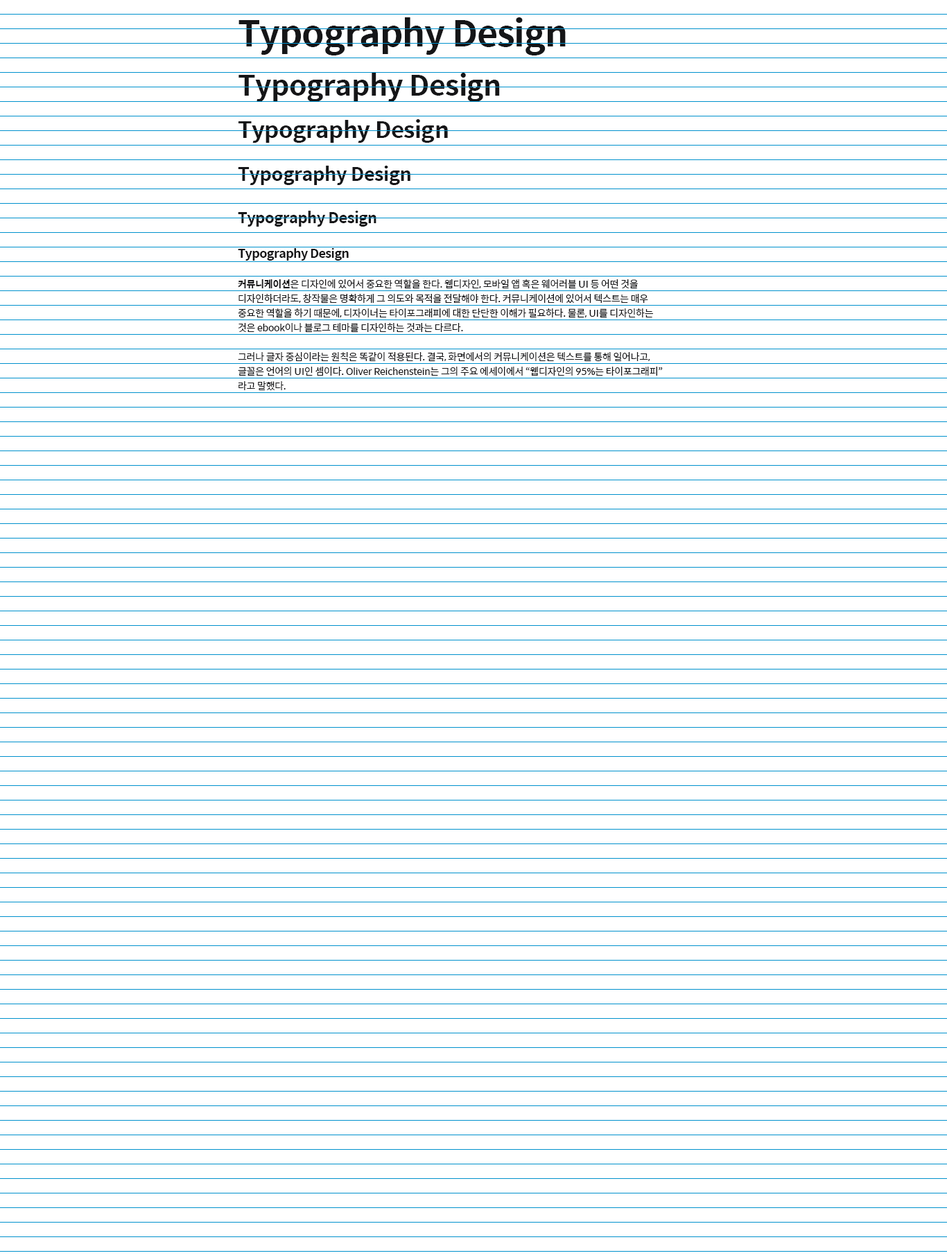
<style>
.page{position:relative;width:947px;height:1260px;background:#ffffff}
.page>*{position:absolute;margin:0}
.t1{font:35.9px "SpoqaHanSans-Bold";letter-spacing:-0.02em;color:#151517}
.t2{font:28.7px "SpoqaHanSans-Bold";letter-spacing:-0.02em;color:#151517}
.t3{font:23px "SpoqaHanSans-Bold";letter-spacing:-0.02em;color:#151517}
.t4{font:18.9px "SpoqaHanSans-Bold";letter-spacing:-0.02em;color:#151517}
.t5{font:15.2px "SpoqaHanSans-Bold";letter-spacing:-0.02em;color:#151517}
.t6{font:12.1px "SpoqaHanSans-Bold";letter-spacing:-0.02em;color:#151517}
.t7{font:9.7px "SpoqaHanSans-Regular";letter-spacing:-0.02em;color:#151517}
.t8{font:9.7px "SpoqaHanSans-Bold";letter-spacing:-0.02em;color:#151517}
</style>
<div class="page">
<p class="t1" style="left:238px;top:17px;width:327px;height:38px">Typography Design</p>
<p class="t2" style="left:238px;top:73px;width:262px;height:29px">Typography Design</p>
<p class="t3" style="left:238px;top:119px;width:210px;height:24px">Typography Design</p>
<p class="t4" style="left:238px;top:166px;width:172px;height:19px">Typography Design</p>
<p class="t5" style="left:238px;top:211px;width:138px;height:16px">Typography Design</p>
<p class="t6" style="left:238px;top:248px;width:111px;height:13px">Typography Design</p>
<p class="t7" style="left:238px;top:279px;width:424px;height:111px"><span class="t8">커뮤니케이션</span>은 디자인에 있어서 중요한 역할을 한다. 웹디자인, 모바일 앱 혹은 웨어러블 UI 등 어떤 것을 디자인하더라도, 창작물은 명확하게 그 의도와 목적을 전달해야 한다. 커뮤니케이션에 있어서 텍스트는 매우 중요한 역할을 하기 때문에, 디자이너는 타이포그래피에 대한 단단한 이해가 필요하다. 물론, UI를 디자인하는 것은 ebook이나 블로그 테마를 디자인하는 것과는 다르다. <br>그러나 글자 중심이라는 원칙은 똑같이 적용된다. 결국, 화면에서의 커뮤니케이션은 텍스트를 통해 일어나고, 글꼴은 언어의 UI인 셈이다. Oliver Reichenstein는 그의 주요 에세이에서 “웹디자인의 95%는 타이포그래피” 라고 말했다.</p>
</div>
